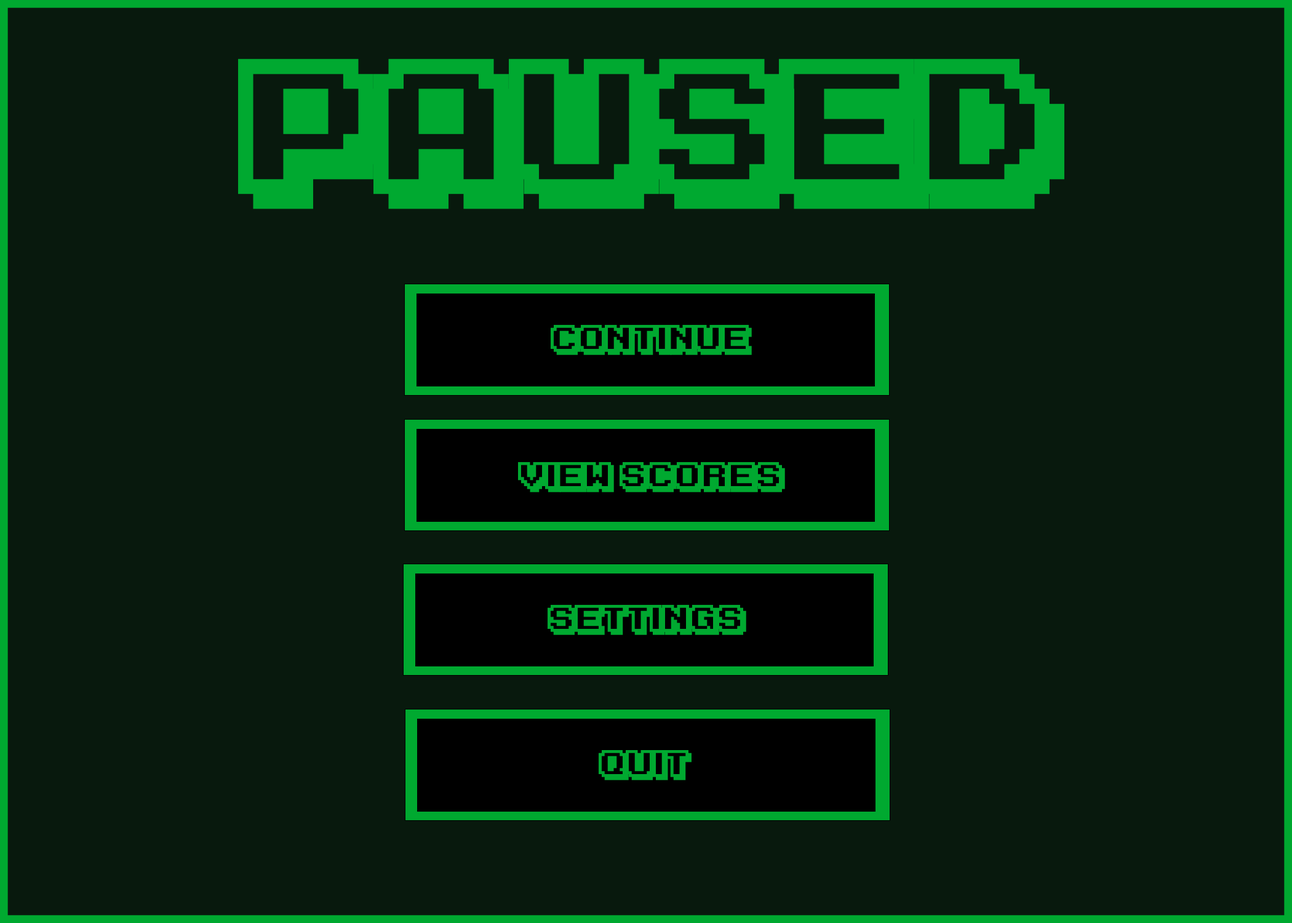
<style>
.page{position:relative;width:1292px;height:923px;background:#08190d}
.page>*{position:absolute;margin:0}
.t1{font:153.8px "KarmaticArcade";color:#00a930}
.t2{font:30.8px "KarmaticArcade";color:#00a930}
</style>
<div class="page">
<p class="t1" style="left:238px;top:58px;width:826px;height:151px">Paused</p>
<p class="t2" style="left:551px;top:325px;width:201px;height:30px">Continue</p>
<p class="t2" style="left:518px;top:462px;width:267px;height:30px">View Scores</p>
<p class="t2" style="left:548px;top:605px;width:198px;height:30px">SETTINGS</p>
<p class="t2" style="left:599px;top:750px;width:93px;height:30px">QUit</p>
</div>
